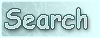
<style>
.page{position:relative;width:100px;height:38px}
.page>*{position:absolute;margin:0}
.t1{font:25px "ComicSansMS-Bold";color:#e2ffff}
</style>
<div class="page">
<p class="t1" style="left:5px;top:8px;width:82px;height:21px">Search</p>
</div>
